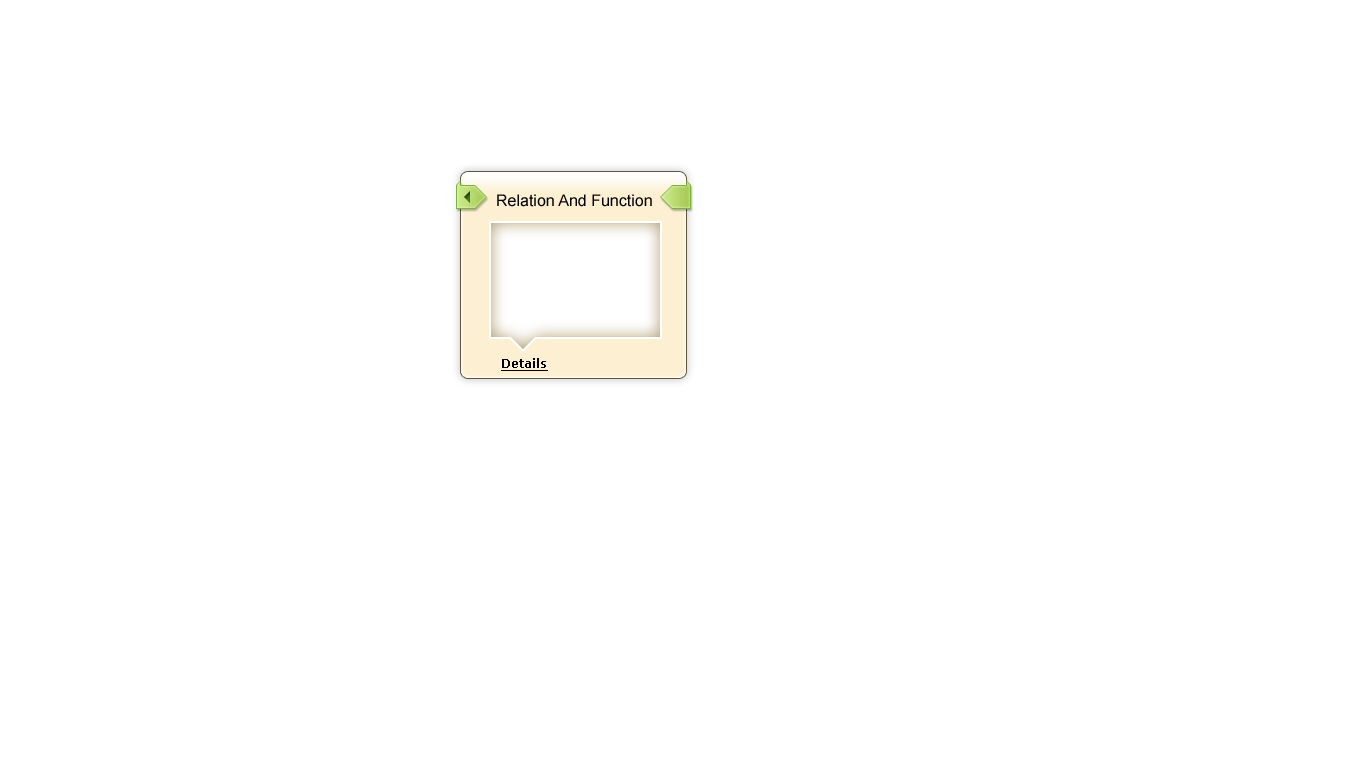
<style>
.page{position:relative;width:1366px;height:768px;background:#ffffff}
.page>*{position:absolute;margin:0}
.t1{font:16px "ArialMT";color:#000000}
.t2{font:12px "Verdana-Bold";color:#010101;text-decoration:underline}
</style>
<div class="page">
<p class="t1" style="left:497px;top:194px;width:155px;height:13px">Relation And Function</p>
<p class="t2" style="left:501px;top:358px;width:47px;height:13px">Details</p>
</div>
